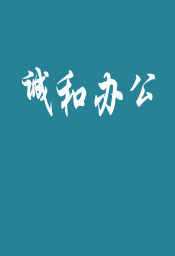
<style>
.page{position:relative;width:175px;height:256px;background:#278296}
.page>*{position:absolute;margin:0}
.t1{font:35px "STXingkai";color:#f7f9fa}
</style>
<div class="page">
<p class="t1" style="left:21px;top:67px;width:134px;height:50px">诚和办公</p>
</div>
